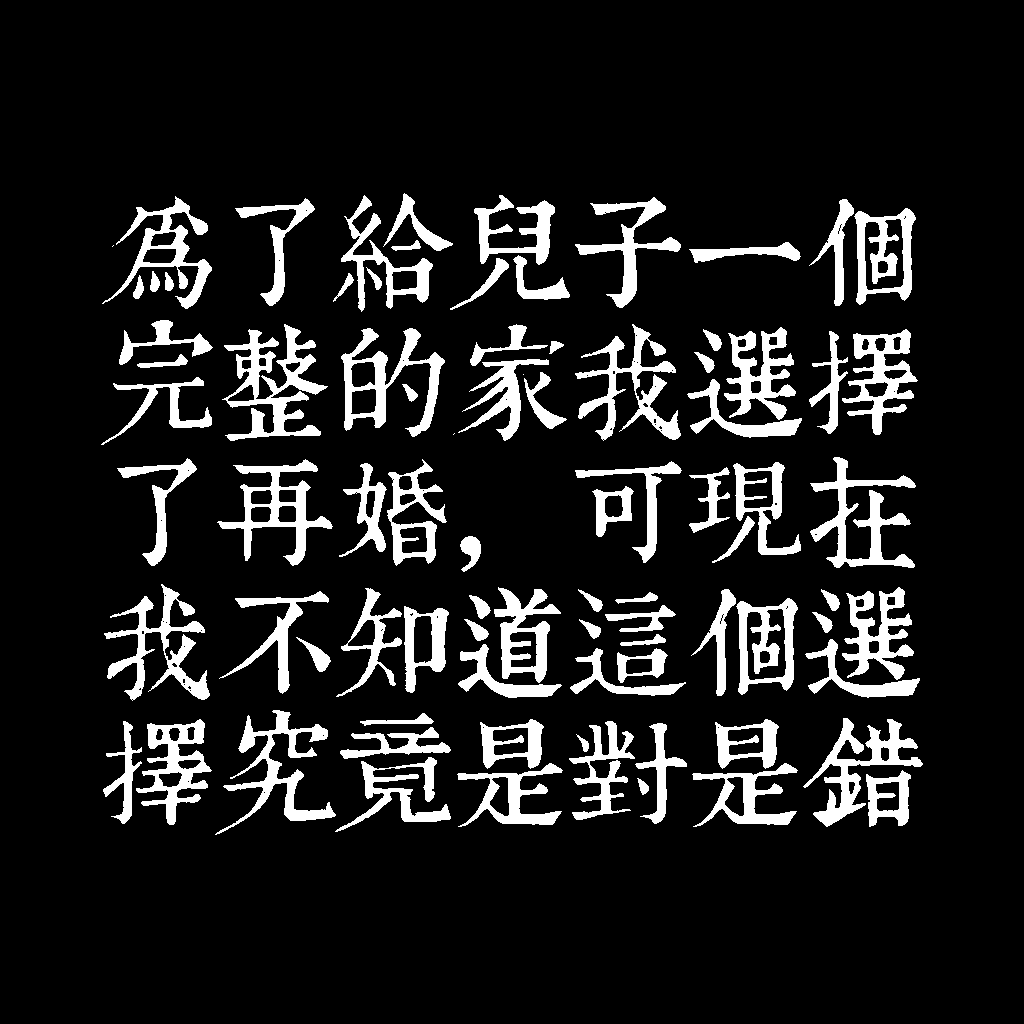
<style>
.page{position:relative;width:1024px;height:1024px;background:#000000}
.page>*{position:absolute;margin:0}
.t1{font:120px/130px "TpldKhangXiDictTrial";letter-spacing:-0.02em;color:#ffffff}
</style>
<div class="page">
<p class="t1" style="left:101px;top:193px;width:822px;height:642px">為了給兒子一個<br>完整的家我選擇<br>了再婚，可現在<br>我不知道這個選<br>擇究竟是對是錯</p>
</div>
